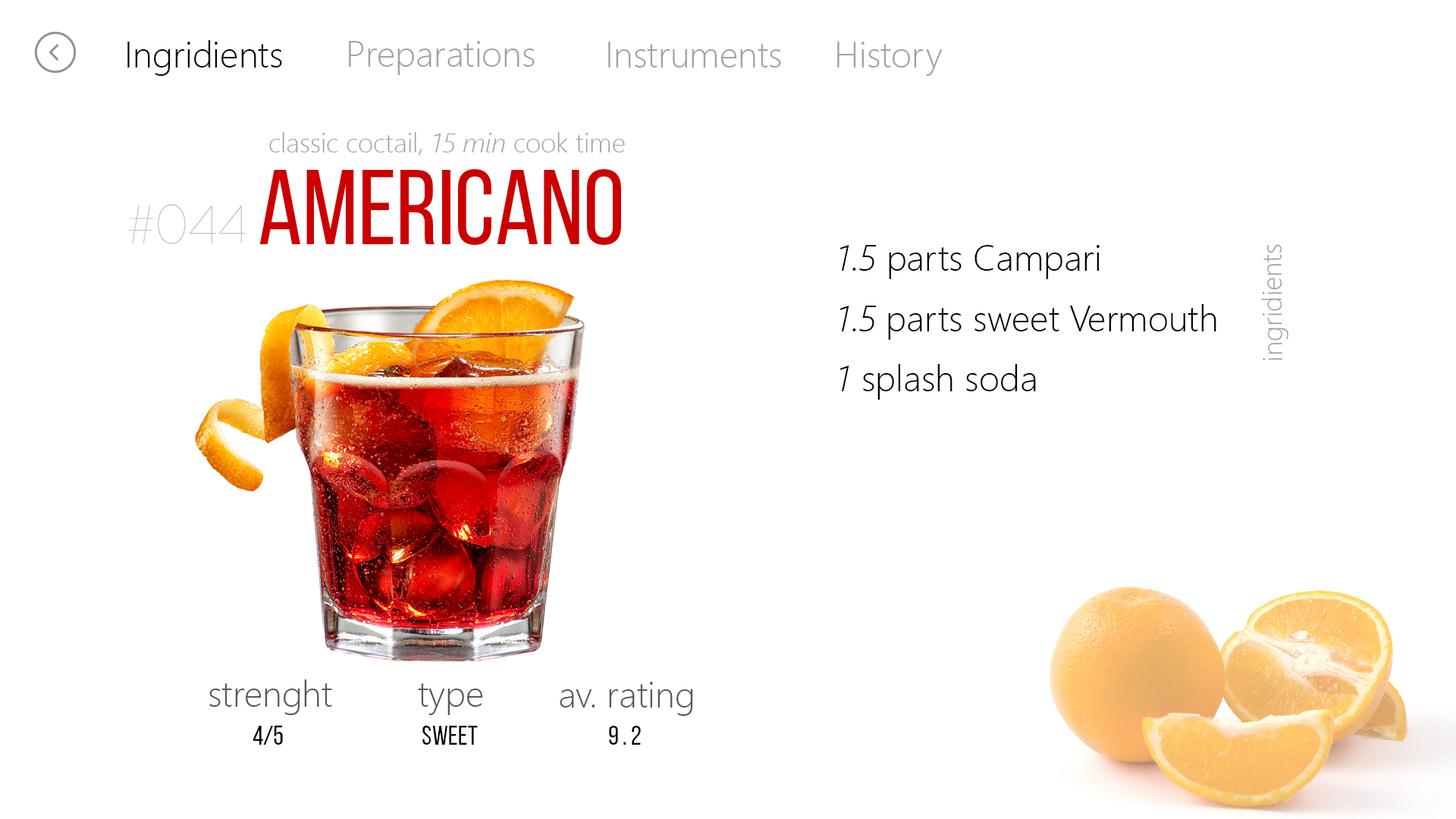
<style>
.page{position:relative;width:1456px;height:819px;background:#ffffff}
.page>*{position:absolute;margin:0}
.t1{font:36.4px "SegoeUI-Light";color:#000000}
.t2{font:36.4px "SegoeUI-Light";color:#a1a1a1}
.t3{font:27.3px "SegoeUI-Light";color:#a1a1a1}
.t4{font:27.3px "SegoeUI-LightItalic";color:#a1a1a1}
.t5{font:106.2px "BebasNeueRegular";color:#cc0000}
.t6{font:54.6px "Code-Pro-Light";color:#c9c9c9}
.t7{font:36.4px "SegoeUI-LightItalic";color:#000000}
.t8{font:36.4px "SegoeUI-Light";color:#585858}
.t9{font:27.3px "BebasNeueRegular";color:#000000}
</style>
<div class="page">
<p class="t1" style="left:127px;top:40px;width:155px;height:36px">Ingridients</p>
<p class="t2" style="left:349px;top:41px;width:186px;height:34px">Preparations</p>
<p class="t2" style="left:608px;top:42px;width:173px;height:25px">Instruments</p>
<p class="t2" style="left:837px;top:42px;width:106px;height:34px">History</p>
<p class="t3" style="left:269px;top:132px;width:356px;height:23px">classic coctail, <span class="t4">15 min</span> cook time</p>
<p class="t5" style="left:259px;top:169px;width:362px;height:76px">AMERICANO</p>
<p class="t6" style="left:128px;top:204px;width:118px;height:40px">#044</p>
<p class="t1" style="left:839px;top:245px;width:261px;height:34px"><span class="t7">1.5</span> parts Campari</p>
<p class="t3" style="left:1261px;top:244px;width:27px;height:116px;rotate:-91deg">ingridients</p>
<p class="t1" style="left:839px;top:304px;width:377px;height:36px"><span class="t7">1.5</span> parts sweet Vermouth</p>
<p class="t1" style="left:839px;top:364px;width:197px;height:36px"><span class="t7">1</span> splash soda</p>
<p class="t8" style="left:209px;top:679px;width:123px;height:36px">strenght</p>
<p class="t8" style="left:418px;top:683px;width:65px;height:32px">type</p>
<p class="t8" style="left:560px;top:682px;width:133px;height:34px">av. rating</p>
<p class="t9" style="left:253px;top:725px;width:30px;height:20px">4/5</p>
<p class="t9" style="left:422px;top:725px;width:56px;height:20px">sweet</p>
<p class="t9" style="left:609px;top:726px;width:32px;height:19px">9 . 2</p>
</div>
